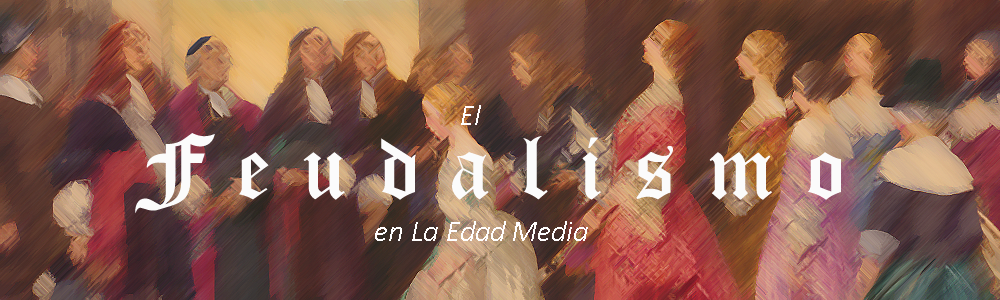
<style>
.page{position:relative;width:1000px;height:300px}
.page>*{position:absolute;margin:0}
.t1{font:30px "Calibri-LightItalic";color:#fffefe}
.t2{font:100px "OldLondon";color:#fbfbfb}
</style>
<div class="page">
<p class="t1" style="left:461px;top:105px;width:20px;height:20px">El</p>
<p class="t2" style="left:135px;top:133px;width:706px;height:80px">F e u d a l i s m o</p>
<p class="t1" style="left:375px;top:221px;width:213px;height:20px">en La Edad Media</p>
</div>
